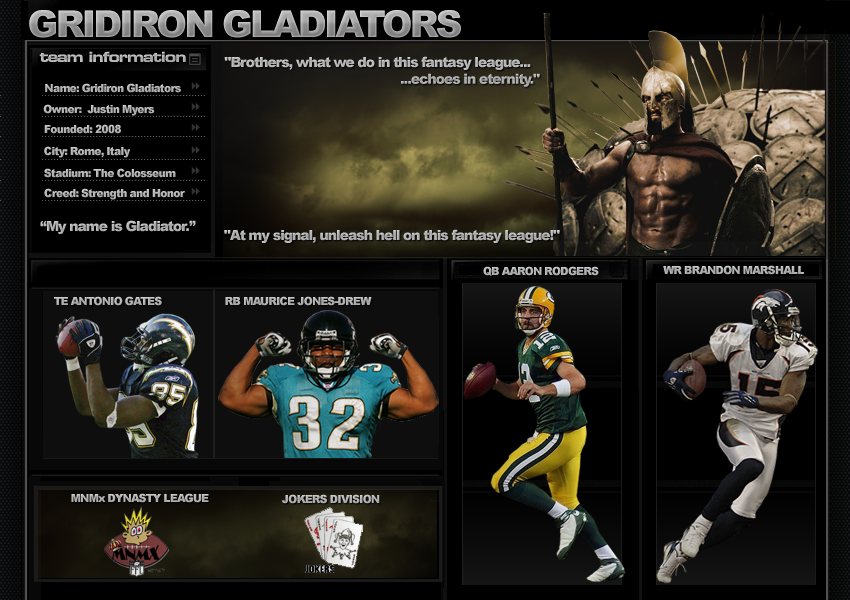
<style>
.page{position:relative;width:850px;height:600px;background:#000000}
.page>*{position:absolute;margin:0}
.t1{font:37px "Arial-Black";letter-spacing:-0.075em;color:#9e9e9e}
.t2{font:14px "EurostileLTStd-BoldEx2";letter-spacing:-0.075em;color:#b4b4b4}
.t3{font:14px "Arial-Black";letter-spacing:-0.075em;color:#b5b5b5}
.t4{font:11px "Arial-Black";letter-spacing:-0.075em;color:#9e9e9e}
.t5{font:11px "Arial-Black";letter-spacing:-0.075em;color:#b5b5b5}
.t6{font:14px "Arial-Black";letter-spacing:-0.075em;color:#9e9e9e}
</style>
<div class="page">
<p class="t1" style="left:29px;top:10px;width:432px;height:28px">GRIDIRON GLADIATORS</p>
<p class="t2" style="left:39px;top:51px;width:147px;height:11px">team information</p>
<p class="t3" style="left:224px;top:56px;width:316px;height:31px;text-align:center">"Brothers, what we do in this fantasy league...<br>                                                   ...echoes in eternity."</p>
<p class="t4" style="left:45px;top:83px;width:136px;height:10px">Name: Gridiron Gladiators</p>
<p class="t4" style="left:43px;top:104px;width:112px;height:12px">Owner:  Justin Myers</p>
<p class="t4" style="left:44px;top:124px;width:77px;height:10px">Founded: 2008</p>
<p class="t5" style="left:44px;top:146px;width:87px;height:12px">City: Rome, Italy</p>
<p class="t4" style="left:44px;top:168px;width:132px;height:10px">Stadium: The Colosseum</p>
<p class="t5" style="left:44px;top:188px;width:141px;height:12px">Creed: Strength and Honor</p>
<p class="t6" style="left:40px;top:220px;width:156px;height:14px">“My name is Gladiator.”</p>
<p class="t6" style="left:224px;top:229px;width:336px;height:14px">"At my signal, unleash hell on this fantasy league!"</p>
<p class="t4" style="left:483px;top:266px;width:116px;height:10px">QB AARON RODGERS</p>
<p class="t4" style="left:663px;top:265px;width:141px;height:10px">WR BRANDON MARSHALL</p>
<p class="t5" style="left:54px;top:296px;width:108px;height:10px">TE ANTONIO GATES</p>
<p class="t4" style="left:225px;top:296px;width:147px;height:10px">RB MAURICE JONES-DREW</p>
<p class="t4" style="left:71px;top:493px;width:138px;height:10px">MNMx DYNASTY LEAGUE</p>
<p class="t4" style="left:282px;top:494px;width:98px;height:10px">JOKERS DIVISION</p>
</div>
